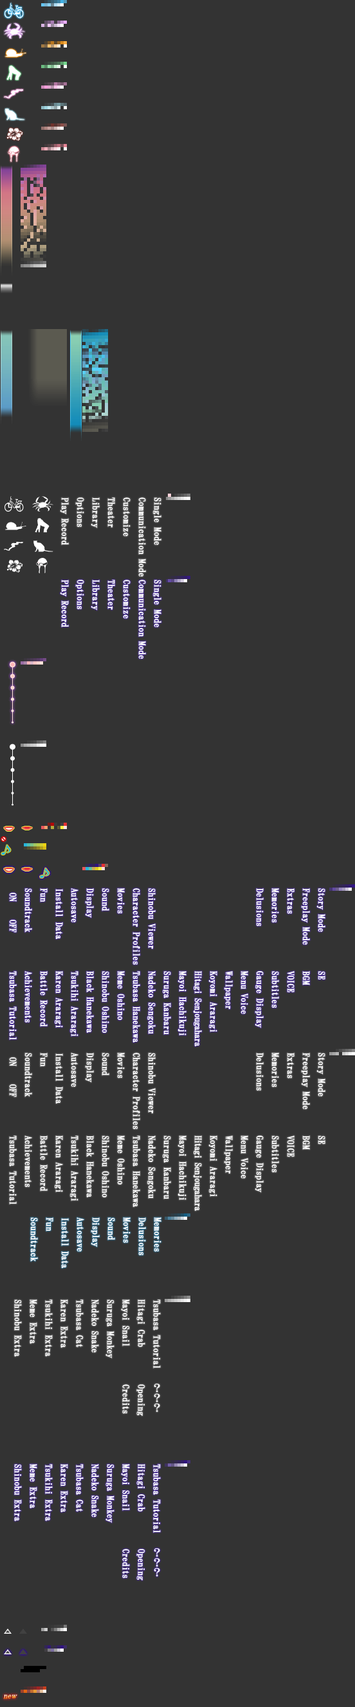
<style>
.page{position:relative;width:355px;height:1707px;background:#333333}
.page>*{position:absolute;margin:0}
.t1{font:9px/15.4px "HGMinchoB";letter-spacing:-0.025em;color:#ffffff;font-weight:bold}
.t2{font:9px/15.4px "HGMinchoB";color:#ffffff;font-weight:bold}
.t3{font:9px/15.4px "HGMinchoB";letter-spacing:-0.075em;color:#ffffff;font-weight:bold}
.t4{font:9px "HGMinchoB";letter-spacing:0.1em;color:#ffffff;font-weight:bold}
.t5{font:9px/19.3px "HGMinchoB";letter-spacing:0.1em;color:#ffffff;font-weight:bold}
</style>
<div class="page">
<p class="t1" style="left:60px;top:498px;width:101px;height:79px;rotate:90deg">Single Mode<br>Communication Mode<br>Customize<br>Theater<br>Library<br>Options<br>Play Record</p>
<p class="t1" style="left:60px;top:580px;width:101px;height:79px;rotate:90deg">Single Mode<br>Communication Mode<br>Customize<br>Theater<br>Library<br>Options<br>Play Record</p>
<p class="t1" style="left:9px;top:888px;width:316px;height:77px;rotate:90deg">Story Mode<br>Freeplay Mode<br>Extras<br>Memories<br>Delusions<br><br><br><br><br><br><br>Shinobu Viewer<br>Character Profiles<br>Movies<br>Sound<br>Display<br>Autosave<br>Install Data<br>Fun<br>Soundtrack<br> ON    OFF</p>
<p class="t1" style="left:9px;top:971px;width:316px;height:76px;rotate:90deg"><span class="t2">SE<br>BGM<br>VOICE<br></span>Subtitles<br>Gauge Display<br>Menu Voice<br>Wallpaper<br>Koyomi Araragi<br><span class="t3">Hitagi Senjougahara<br></span>Mayoi Hachikuji<br>Suruga Kanbaru<br>Nadeko Sengoku<br>Tsubasa Hanekawa<br>Meme Oshino<br>Shinobu Oshino<br>Black Hanekawa<br>Tsukihi Araragi<br>Karen Araragi<br>Battle Record<br>Achievements<br>Tsubasa Tutorial</p>
<p class="t1" style="left:9px;top:1053px;width:316px;height:77px;rotate:90deg">Story Mode<br>Freeplay Mode<br>Extras<br>Memories<br>Delusions<br><br><br><br><br><br><br>Shinobu Viewer<br>Character Profiles<br>Movies<br>Sound<br>Display<br>Autosave<br>Install Data<br>Fun<br>Soundtrack<br> ON    OFF</p>
<p class="t1" style="left:9px;top:1136px;width:316px;height:75px;rotate:90deg"><span class="t2">SE<br>BGM<br>VOICE<br></span>Subtitles<br>Gauge Display<br>Menu Voice<br>Wallpaper<br>Koyomi Araragi<br><span class="t3">Hitagi Senjougahara<br></span>Mayoi Hachikuji<br>Suruga Kanbaru<br>Nadeko Sengoku<br>Tsubasa Hanekawa<br>Meme Oshino<br>Shinobu Oshino<br>Black Hanekawa<br>Tsukihi Araragi<br>Karen Araragi<br>Battle Record<br>Achievements<br>Tsubasa Tutorial</p>
<p class="t1" style="left:30px;top:1218px;width:131px;height:50px;rotate:90deg">Memories<br>Delusions<br>Movies<br>Sound<br>Display<br>Autosave<br>Install Data<br>Fun<br>Soundtrack</p>
<p class="t1" style="left:14px;top:1300px;width:147px;height:69px;rotate:90deg">Tsubasa Tutorial<br>Hitagi Crab<br>Mayoi Snail<br>Suruga Monkey<br>Nadeko Snake<br>Tsubasa Cat<br>Karen Extra<br>Tsukihi Extra<br>Meme Extra<br>Shinobu Extra</p>
<p class="t1" style="left:122px;top:1385px;width:23px;height:31px;rotate:90deg">Opening<br>Credits</p>
<p class="t4" style="left:154px;top:1384px;width:6px;height:28px">？？？</p>
<p class="t1" style="left:14px;top:1464px;width:147px;height:69px;rotate:90deg">Tsubasa Tutorial<br>Hitagi Crab<br>Mayoi Snail<br>Suruga Monkey<br>Nadeko Snake<br>Tsubasa Cat<br>Karen Extra<br>Tsukihi Extra<br>Meme Extra<br>Shinobu Extra</p>
<p class="t1" style="left:122px;top:1549px;width:23px;height:32px;rotate:90deg">Opening<br>Credits</p>
<p class="t5" style="left:154px;top:1549px;width:6px;height:28px">？？？</p>
</div>
